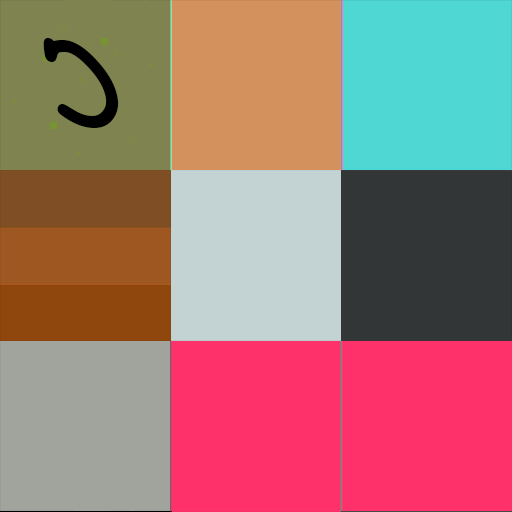
<style>
.page{position:relative;width:512px;height:512px;background:#ff316a}
.page>*{position:absolute;margin:0}
.t1{font:119.7px "ComicSansMS";color:#000000;font-style:italic}
</style>
<div class="page">
<p class="t1" style="left:43px;top:38px;width:76px;height:90px;rotate:-180deg">C</p>
</div>
